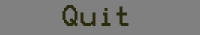
<style>
.page{position:relative;width:200px;height:35px;background:#808080}
.page>*{position:absolute;margin:0}
.t1{font:24px "Terminal";color:#2c2b0d}
</style>
<div class="page">
<p class="t1" style="left:62px;top:5px;width:67px;height:21px">Quit</p>
</div>
